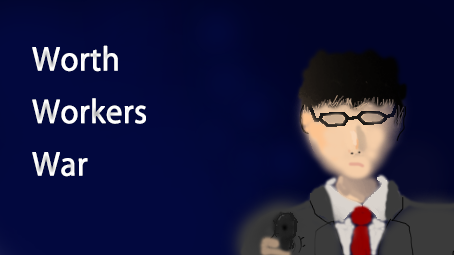
<style>
.page{position:relative;width:454px;height:255px;background:#02083e}
.page>*{position:absolute;margin:0}
.t1{font:30px "KozGoPr6N-Regular";color:#ffffff;font-weight:bold}
</style>
<div class="page">
<p class="t1" style="left:32px;top:45px;width:114px;height:132px">Worth<br>Workers<br>War</p>
</div>
